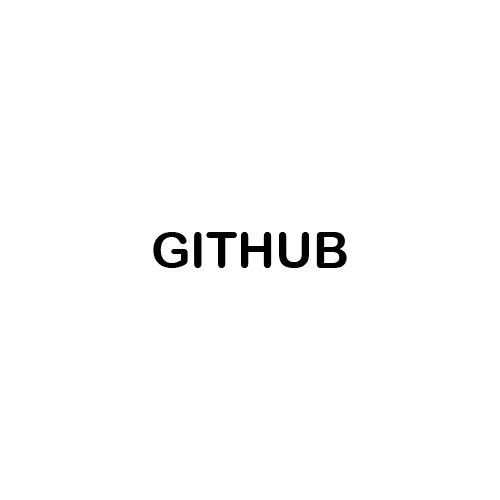
<style>
.page{position:relative;width:500px;height:500px;background:#ffffff}
.page>*{position:absolute;margin:0}
.t1{font:50px "ArialRoundedMTBold";color:#000000}
</style>
<div class="page">
<p class="t1" style="left:153px;top:232px;width:194px;height:36px">GITHUB</p>
</div>
